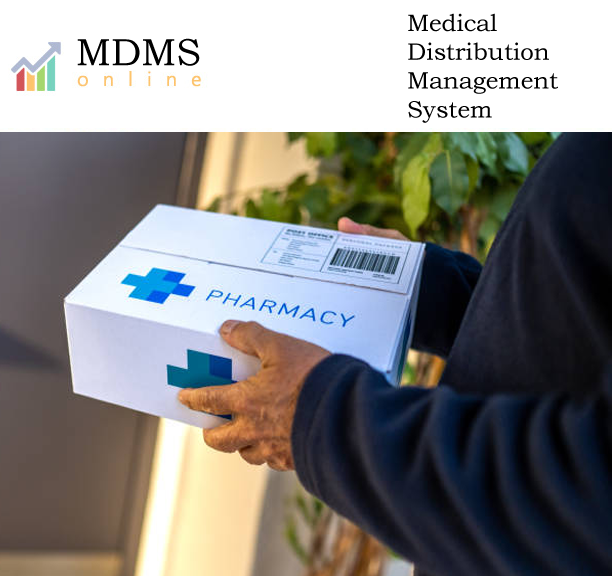
<style>
.page{position:relative;width:612px;height:576px;background:#ffffff}
.page>*{position:absolute;margin:0}
.t1{font:24px "BookmanOldStyle";color:#000000}
.t2{font:38px "BookmanOldStyle";color:#000000}
</style>
<div class="page">
<p class="t1" style="left:408px;top:13px;width:150px;height:110px">Medical<br>Distribution <br>Management<br>System</p>
<p class="t2" style="left:77px;top:38px;width:123px;height:28px">MDMS</p>
</div>
